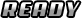
<style>
.page{position:relative;width:82px;height:18px;background:#000001}
.page>*{position:absolute;margin:0}
.t1{font:20px "Aero";letter-spacing:0.125em}
</style>
<div class="page">
<p class="t1" style="left:2px;top:2px;width:78px;height:14px">READY</p>
</div>
